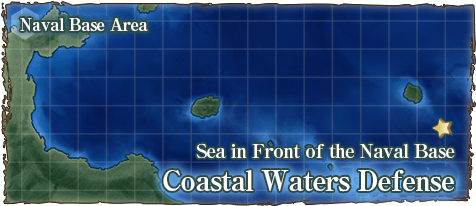
<style>
.page{position:relative;width:476px;height:206px}
.page>*{position:absolute;margin:0}
.t1{font:17px "RyuminPro-ExBold";letter-spacing:-0.04em;color:#ffffff}
.t2{font:19px "RyuminPro-ExBold";letter-spacing:-0.04em;color:#ffffff}
.t3{font:28px "RyuminPro-ExBold";letter-spacing:-0.04em;color:#ffffff}
</style>
<div class="page">
<p class="t1" style="left:20px;top:18px;width:128px;height:14px">Naval Base Area</p>
<p class="t2" style="left:196px;top:143px;width:259px;height:16px">Sea in Front of the Naval Base</p>
<p class="t3" style="left:163px;top:170px;width:291px;height:22px">Coastal Waters Defense</p>
</div>
